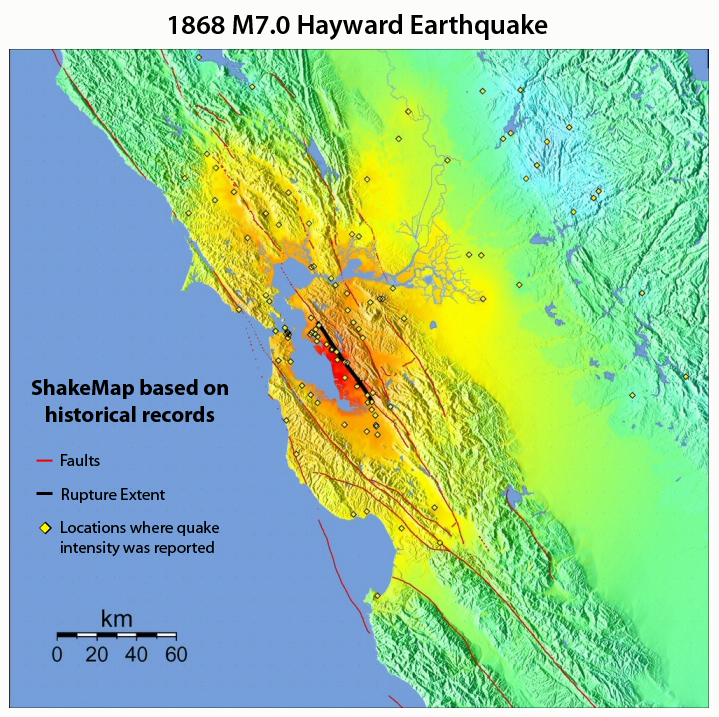
<style>
.page{position:relative;width:719px;height:717px}
.page>*{position:absolute;margin:0}
.t1{font:27.8px "MyriadPro-Semibold";color:#000000}
.t2{font:22.2px "MyriadPro-Bold";color:#000000}
.t3{font:16.7px "MyriadPro-Regular";color:#000000}
</style>
<div class="page">
<p class="t1" style="left:168px;top:14px;width:380px;height:26px">1868 M7.0 Hayward Earthquake</p>
<p class="t2" style="left:31px;top:379px;width:197px;height:43px;text-align:center">ShakeMap based on<br>historical records</p>
<p class="t3" style="left:61px;top:454px;width:39px;height:12px">Faults</p>
<p class="t3" style="left:62px;top:488px;width:103px;height:15px">Rupture Extent</p>
<p class="t3" style="left:61px;top:521px;width:158px;height:36px">Locations where quake <br>intensity was reported</p>
</div>
